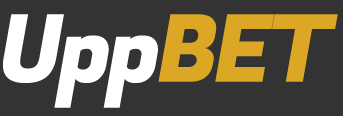
<style>
.page{position:relative;width:343px;height:116px;background:#333333}
.page>*{position:absolute;margin:0}
.t1{font:93.6px "FugazOne-Regular";letter-spacing:-0.05em;color:#ffffff}
.t2{font:93.6px "FugazOne-Regular";letter-spacing:-0.05em;color:#dda726}
</style>
<div class="page">
<p class="t1" style="left:3px;top:14px;width:335px;height:94px">Upp<span class="t2">BET</span></p>
</div>
